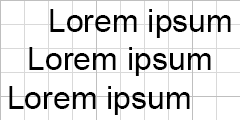
<style>
.page{position:relative;width:240px;height:120px;background:#ffffff}
.page>*{position:absolute;margin:0}
.t1{font:32px "ArialMT";color:#000000}
</style>
<div class="page">
<p class="t1" style="left:9px;top:9px;width:222px;height:106px;text-align:right">Lorem ipsum<br>Lorem ipsum<br>Lorem ipsum</p>
</div>
